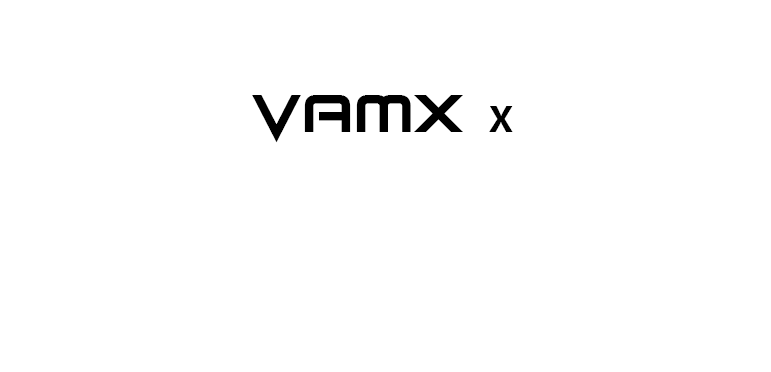
<style>
.page{position:relative;width:771px;height:372px;background:#ffffff}
.page>*{position:absolute;margin:0}
.t1{font:58.2px "SeldomScene";color:#000000}
.t2{font:33.5px "MicrosoftYaHei-Bold";color:#000000}
</style>
<div class="page">
<p class="t1" style="left:252px;top:95px;width:261px;height:48px">VAMX   <span class="t2">X</span></p>
</div>
